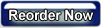
<style>
.page{position:relative;width:101px;height:28px}
.page>*{position:absolute;margin:0}
.t1{font:14.2px "Arial-BoldMT";color:#fdfcfc;scale:0.96 1}
</style>
<div class="page">
<p class="t1" style="left:9px;top:9px;width:85px;height:12px">Reorder Now</p>
</div>
